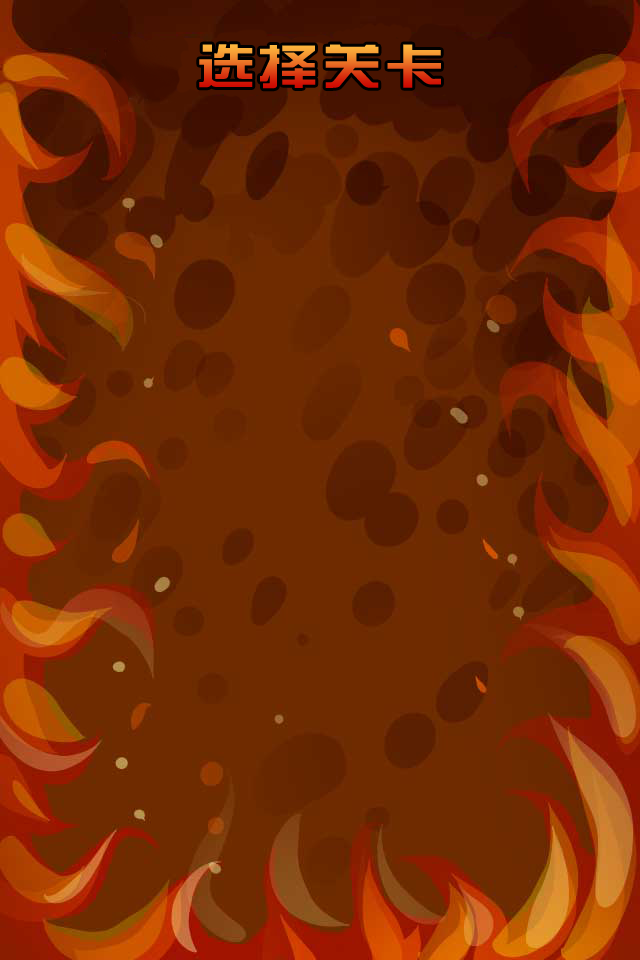
<style>
.page{position:relative;width:640px;height:960px}
.page>*{position:absolute;margin:0}
.t1{font:48px "JZhongYi";letter-spacing:0.05em;scale:1.25 1}
</style>
<div class="page">
<p class="t1" style="left:199px;top:44px;width:242px;height:45px">选择关卡</p>
</div>
